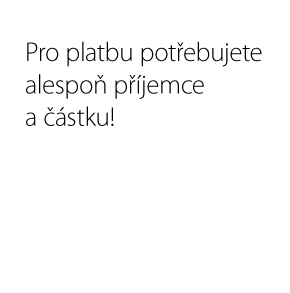
<style>
.page{position:relative;width:290px;height:293px;background:#ffffff}
.page>*{position:absolute;margin:0}
.t1{font:27px "MyriadPro-Light";color:#000000}
</style>
<div class="page">
<p class="t1" style="left:26px;top:41px;width:236px;height:85px">Pro platbu potřebujete<br>alespoň příjemce<br>a částku!</p>
</div>
